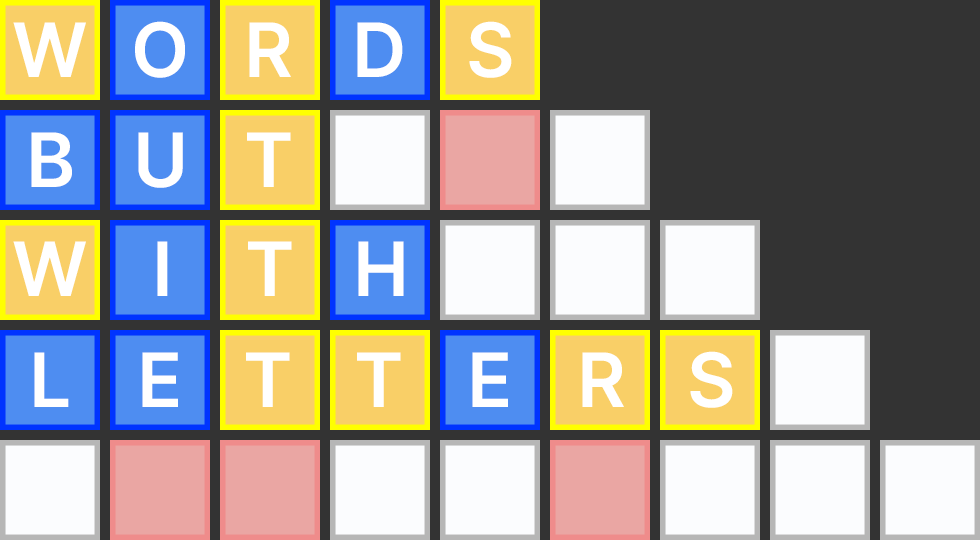
<style>
.page{position:relative;width:980px;height:540px;background:#333333}
.page>*{position:absolute;margin:0}
.t1{font:75px "Inter-SemiBold";color:#ffffff}
</style>
<div class="page">
<p class="t1" style="left:13px;top:22px;width:73px;height:55px">W</p>
<p class="t1" style="left:135px;top:21px;width:50px;height:57px">O</p>
<p class="t1" style="left:249px;top:22px;width:42px;height:55px">R</p>
<p class="t1" style="left:357px;top:22px;width:46px;height:55px">D</p>
<p class="t1" style="left:469px;top:21px;width:43px;height:57px">S</p>
<p class="t1" style="left:31px;top:132px;width:41px;height:55px">B</p>
<p class="t1" style="left:138px;top:132px;width:45px;height:56px">U</p>
<p class="t1" style="left:247px;top:132px;width:44px;height:55px">T</p>
<p class="t1" style="left:13px;top:241px;width:73px;height:55px">W</p>
<p class="t1" style="left:157px;top:241px;width:11px;height:55px">I</p>
<p class="t1" style="left:248px;top:241px;width:44px;height:55px">T</p>
<p class="t1" style="left:358px;top:241px;width:46px;height:55px">H</p>
<p class="t1" style="left:34px;top:352px;width:35px;height:55px">L</p>
<p class="t1" style="left:142px;top:352px;width:36px;height:55px">E</p>
<p class="t1" style="left:246px;top:352px;width:44px;height:55px">T</p>
<p class="t1" style="left:357px;top:352px;width:44px;height:55px">T</p>
<p class="t1" style="left:472px;top:352px;width:36px;height:55px">E</p>
<p class="t1" style="left:582px;top:352px;width:42px;height:55px">R</p>
<p class="t1" style="left:690px;top:351px;width:43px;height:57px">S</p>
</div>
